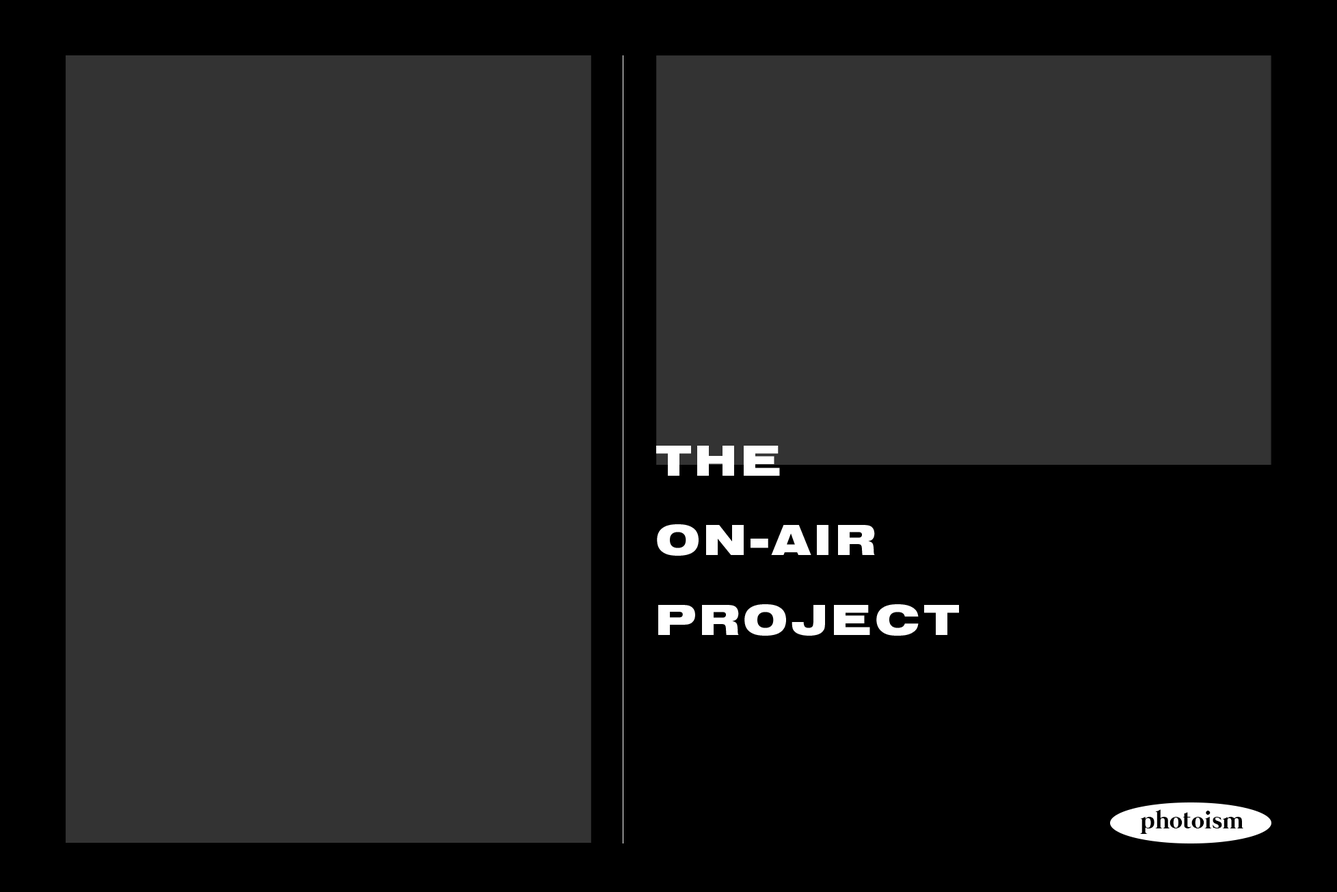
<style>
.page{position:relative;width:1337px;height:892px;background:#333333}
.page>*{position:absolute;margin:0}
.t1{font:45.6px "NimbusSansDOT-BlacExte";letter-spacing:0.075em;color:#ffffff}
.t2{font:25.6px "Mermaid-Bold";color:#000000}
</style>
<div class="page">
<p class="t1" style="left:656px;top:446px;width:303px;height:190px">THE<br>ON-AIR<br>PROJECT</p>
<p class="t2" style="left:1140px;top:809px;width:104px;height:25px">photoism</p>
</div>
